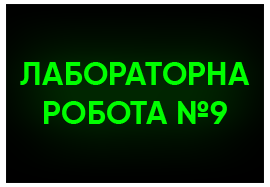
<style>
.page{position:relative;width:270px;height:187px}
.page>*{position:absolute;margin:0}
.t1{font:32.5px "Gilroy-Bold";color:#00ff00;text-transform:uppercase}
</style>
<div class="page">
<p class="t1" style="left:20px;top:62px;width:230px;height:62px;text-align:center">лабораторна<br>робота №9</p>
</div>
